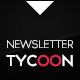
<style>
.page{position:relative;width:80px;height:80px}
.page>*{position:absolute;margin:0}
.t1{font:10px "TYPOGRAPHPRO-Light";letter-spacing:-0.05em;color:#ffffff}
.t2{font:14px "TYPOGRAPHPRO-SemiBold";letter-spacing:-0.05em;color:#ffffff}
.t3{font:14px "TYPOGRAPHPRO-SemiBold";letter-spacing:-0.05em;color:#e7284b}
</style>
<div class="page">
<p class="t1" style="left:7px;top:40px;width:66px;height:9px">NEWSLETTER</p>
<p class="t2" style="left:6px;top:54px;width:67px;height:13px">TYC<span class="t3">OO</span>N</p>
</div>
